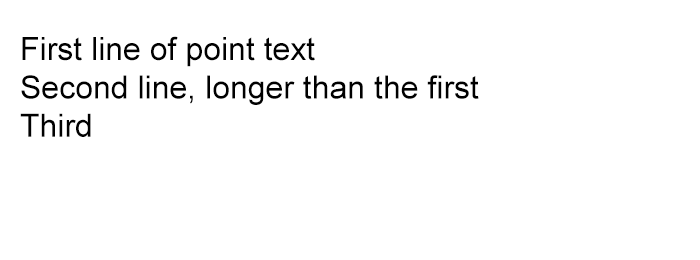
<style>
.page{position:relative;width:700px;height:260px;background:#ffffff}
.page>*{position:absolute;margin:0}
.t1{font:32px "ArialMT";color:#000000}
</style>
<div class="page">
<p class="t1" style="left:20px;top:36px;width:459px;height:101px">First line of point text<br>Second line, longer than the first<br>Third</p>
</div>
